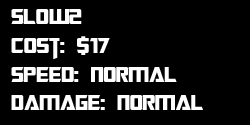
<style>
.page{position:relative;width:250px;height:125px;background:#000000}
.page>*{position:absolute;margin:0}
.t1{font:24px "TransformersMovie";color:#ffffff}
</style>
<div class="page">
<p class="t1" style="left:11px;top:9px;width:192px;height:101px">Slow2<br>Cost: $17<br>Speed: Normal<br>Damage: Normal</p>
</div>
